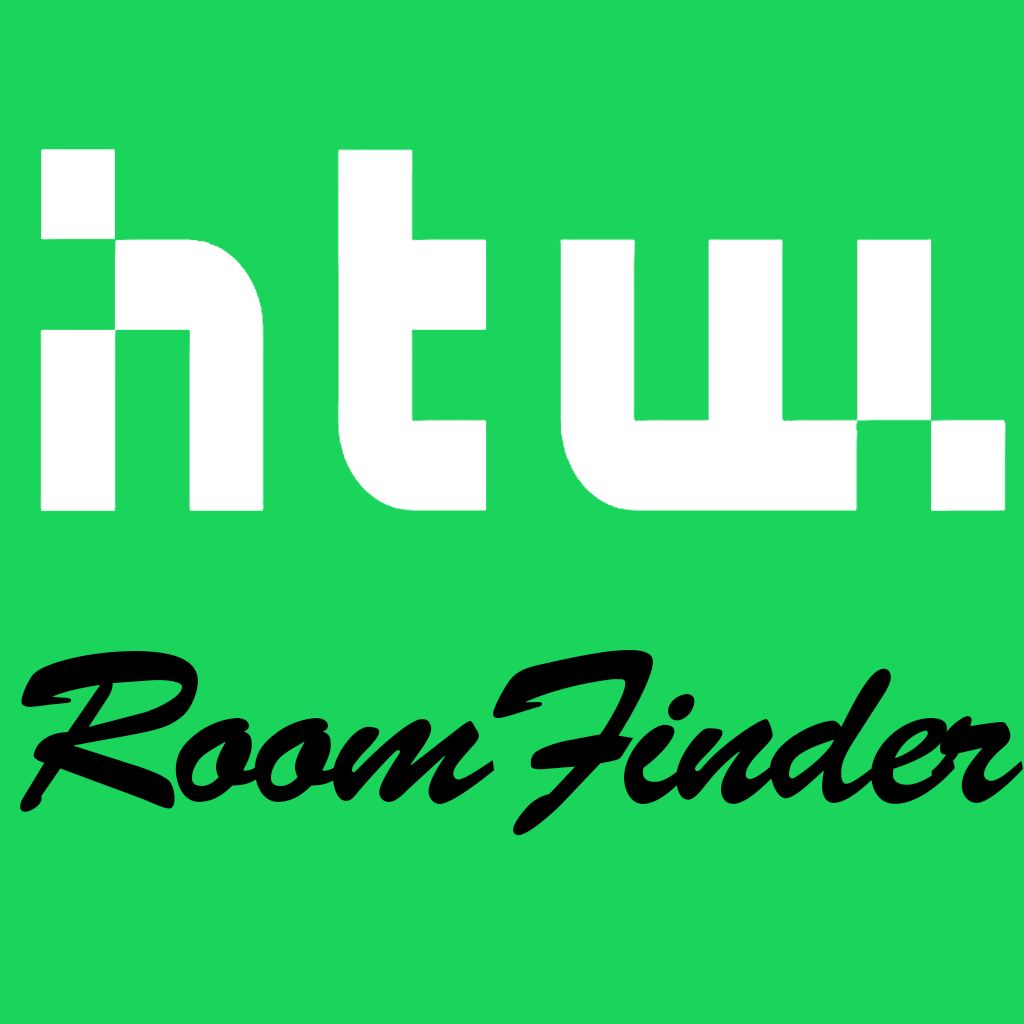
<style>
.page{position:relative;width:1024px;height:1024px;background:#1ad45b}
.page>*{position:absolute;margin:0}
.t1{font:220px "BrushScriptStd";letter-spacing:-0.04em;color:#000000}
</style>
<div class="page">
<p class="t1" style="left:20px;top:650px;width:1003px;height:186px">RoomFinder</p>
</div>
